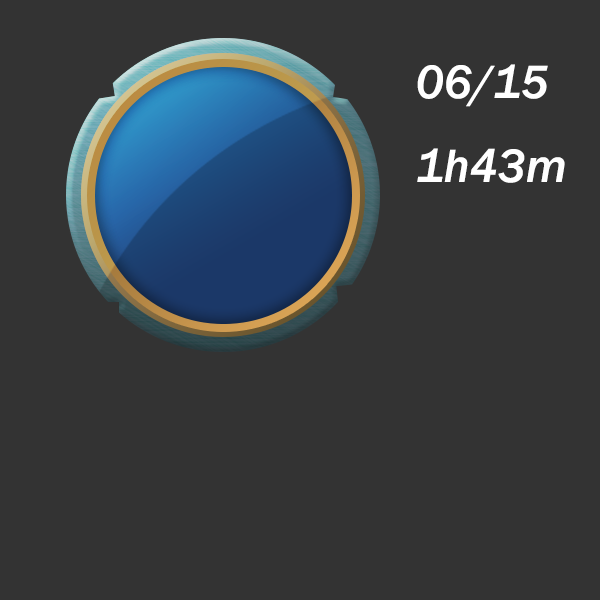
<style>
.page{position:relative;width:600px;height:600px;background:#333333}
.page>*{position:absolute;margin:0}
.t1{font:48px "FranklinGothic-MediumItalic";color:#ffffff}
</style>
<div class="page">
<p class="t1" style="left:417px;top:64px;width:148px;height:119px">06/15<br>1h43m</p>
</div>
